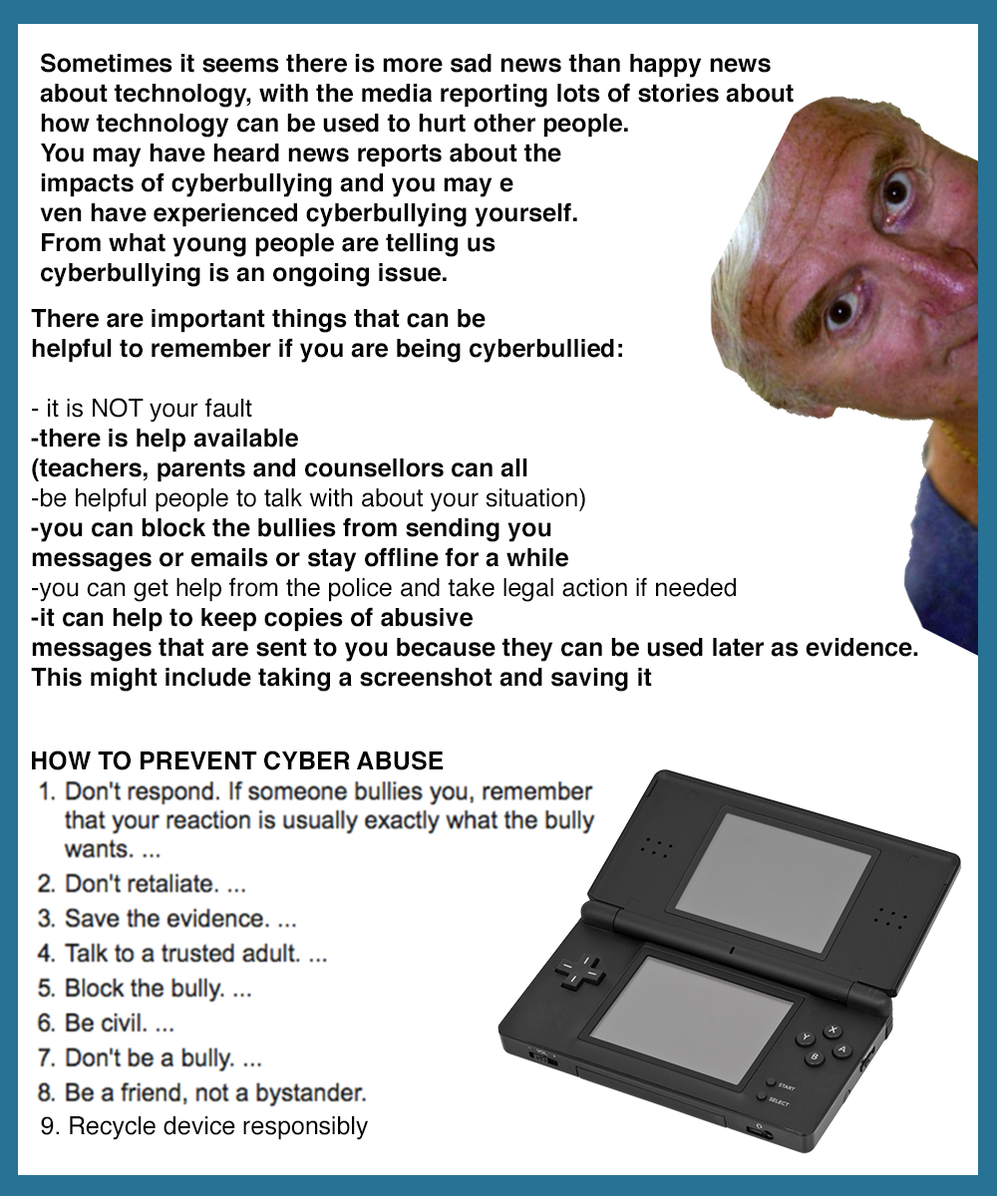
<style>
.page{position:relative;width:997px;height:1196px;background:#ffffff}
.page>*{position:absolute;margin:0}
.t1{font:24.9px "Helvetica-Bold";color:#030303}
.t2{font:24.9px "Helvetica";color:#030303}
</style>
<div class="page">
<p class="t1" style="left:40px;top:53px;width:753px;height:234px">Sometimes it seems there is more sad news than happy news <br>about technology, with the media reporting lots of stories about<br>how technology can be used to hurt other people. <br>You may have heard news reports about the<br>impacts of cyberbullying and you may e<br>ven have experienced cyberbullying yourself.<br>From what young people are telling us<br>cyberbullying is an ongoing issue.</p>
<p class="t1" style="left:31px;top:309px;width:887px;height:383px">There are important things that can be<br>helpful to remember if you are being cyberbullied:<br><br><span class="t2">- it is NOT your fault<br></span>-there is help available <br>(teachers, parents and counsellors can all <br><span class="t2">-be helpful people to talk with about your situation)<br></span>-you can block the bullies from sending you<br>messages or emails or stay offline for a while<br><span class="t2">-you can get help from the police and take legal action if needed<br></span>-it can help to keep copies of abusive <br>messages that are sent to you because they can be used later as evidence.<br>This might include taking a screenshot and saving it</p>
<p class="t1" style="left:32px;top:751px;width:412px;height:20px">HOW TO PREVENT CYBER ABUSE</p>
<p class="t2" style="left:41px;top:1116px;width:327px;height:24px">9. Recycle device responsibly</p>
</div>
